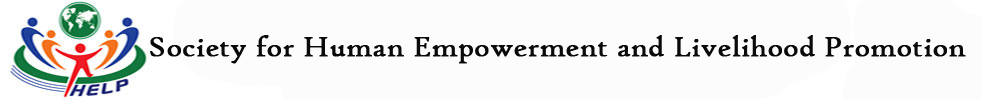
<style>
.page{position:relative;width:982px;height:100px;background:#fcfcfc}
.page>*{position:absolute;margin:0}
.t1{font:30px "HighTowerText-Reg";color:#090909;font-weight:bold}
</style>
<div class="page">
<p class="t1" style="left:150px;top:35px;width:816px;height:29px">Society for Human Empowerment and Livelihood Promotion</p>
</div>
